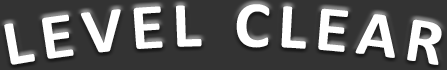
<style>
.page{position:relative;width:447px;height:70px;background:#333333}
.page>*{position:absolute;margin:0}
.t1{font:65px "Calibri-Bold";letter-spacing:0.12em;color:#ffffff}
</style>
<div class="page">
<p class="t1" style="left:4px;top:4px;width:438px;height:61px">LEVEL CLEAR</p>
</div>
